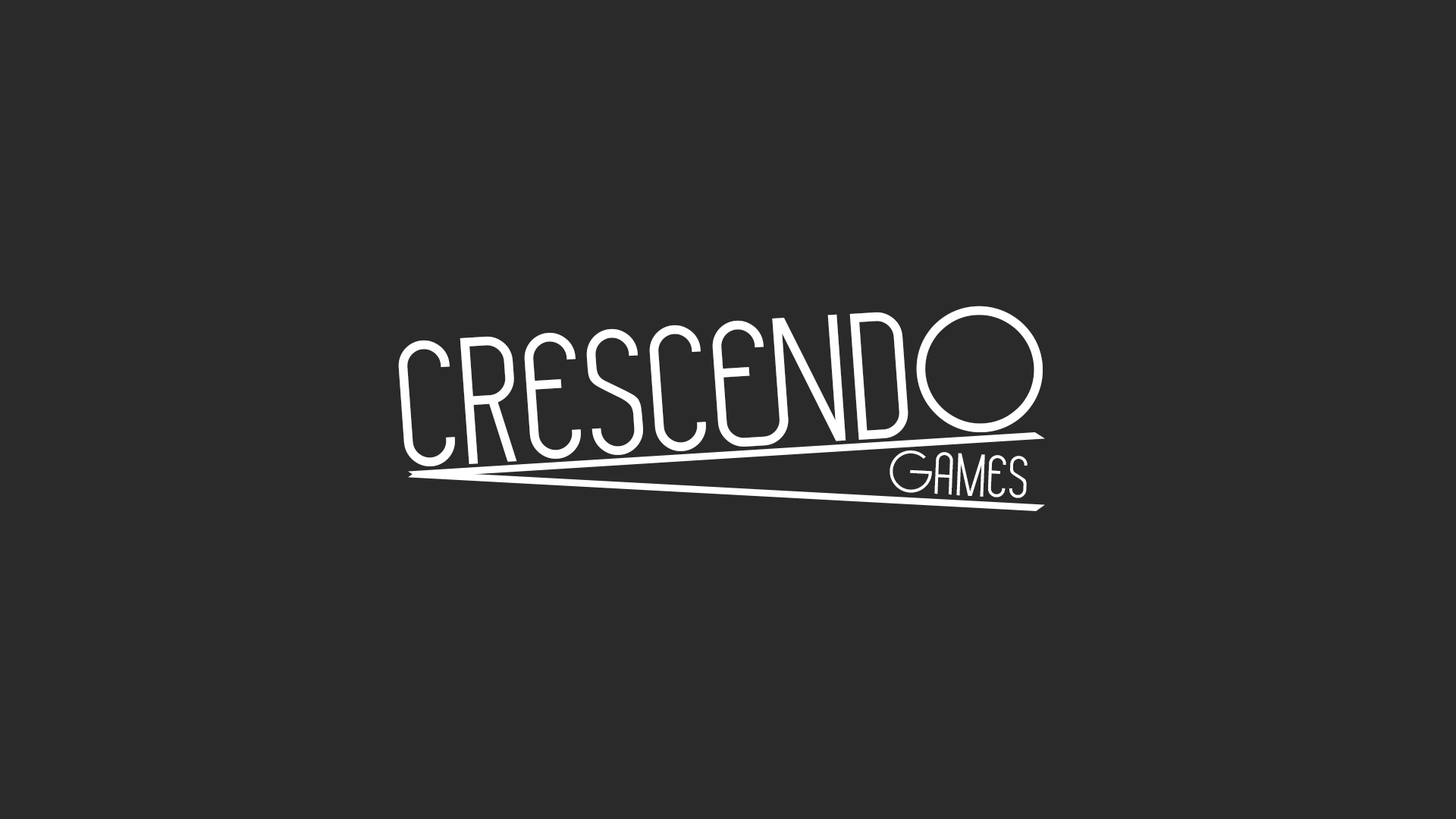
<style>
.page{position:relative;width:1456px;height:819px;background:#2a2a2a}
.page>*{position:absolute;margin:0}
.t1{font:184.1px "Hollenamaresans";color:#ffffff}
.t2{font:61.4px "Hollenamaresans";color:#ffffff}
</style>
<div class="page">
<p class="t1" style="left:398px;top:306px;width:645px;height:160px;rotate:-4deg">Crescendo</p>
<p class="t2" style="left:890px;top:450px;width:138px;height:48px;rotate:3deg">Games</p>
</div>
